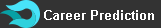
<style>
.page{position:relative;width:161px;height:28px;background:#333333}
.page>*{position:absolute;margin:0}
.t1{font:13px "Arial-BoldMT";color:#ffffff}
</style>
<div class="page">
<p class="t1" style="left:44px;top:10px;width:110px;height:10px">Career Prediction</p>
</div>
